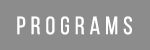
<style>
.page{position:relative;width:150px;height:50px;background:#8c8c8c}
.page>*{position:absolute;margin:0}
.t1{font:25px "BebasNeueRegular";letter-spacing:0.2em;color:#ffffff}
</style>
<div class="page">
<p class="t1" style="left:17px;top:16px;width:115px;height:19px">programs</p>
</div>
